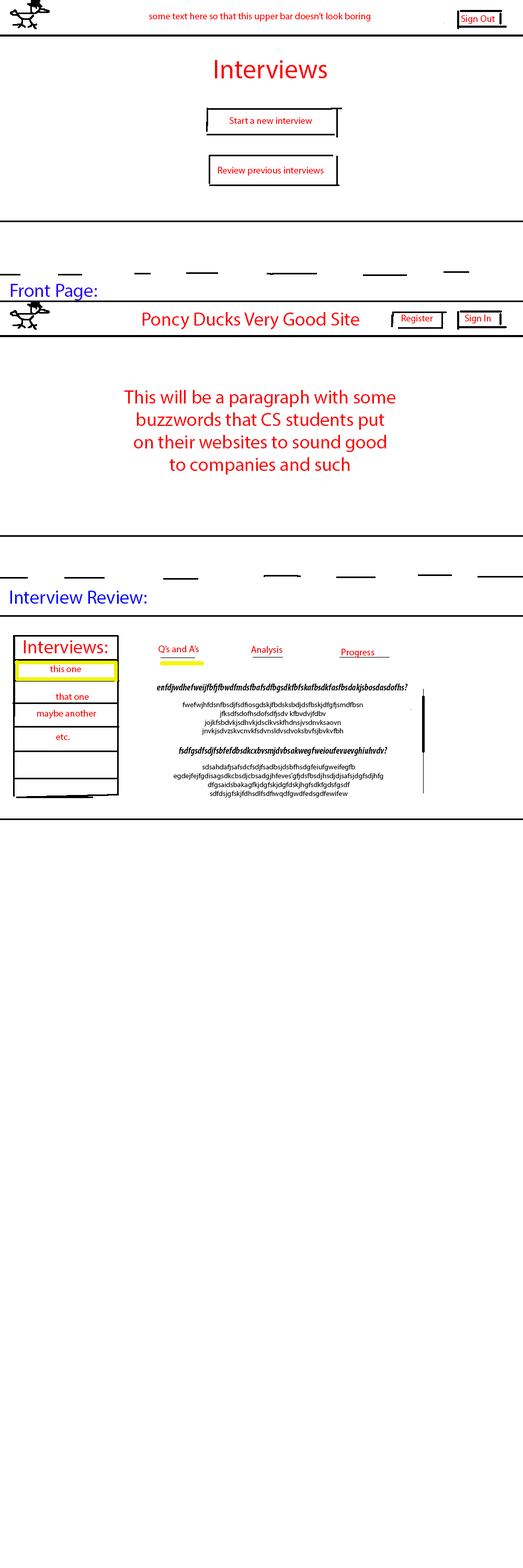
<style>
.page{position:relative;width:523px;height:1568px;background:#ffffff}
.page>*{position:absolute;margin:0}
.t1{font:9.4px "MyriadPro-Regular";color:#ff0000}
.t2{font:26.9px "MyriadPro-Regular";color:#ff0000}
.t3{font:18.8px "MyriadPro-Regular";color:#2400ff}
.t4{font:18.8px "MyriadPro-Regular";color:#ff0000}
.t5{font:18.8px "MyriadPro-Regular";color:#0006ff}
.t6{font:9.4px "MyriadPro-Regular";color:#f40000}
.t7{font:9.4px "MyriadPro-BoldCondIt";color:#000000}
.t8{font:7.3px "MyriadPro-Regular";color:#000000}
</style>
<div class="page">
<p class="t1" style="left:149px;top:13px;width:221px;height:8px">some text here so that this upper bar doesn’t look boring</p>
<p class="t1" style="left:461px;top:15px;width:34px;height:9px">Sign Out</p>
<p class="t2" style="left:215px;top:60px;width:112px;height:18px">Interviews</p>
<p class="t1" style="left:229px;top:117px;width:83px;height:7px">Start a new interview</p>
<p class="t1" style="left:218px;top:167px;width:106px;height:9px">Review previous interviews</p>
<p class="t3" style="left:10px;top:284px;width:87px;height:17px">Front Page:</p>
<p class="t4" style="left:142px;top:312px;width:217px;height:18px">Poncy Ducks Very Good Site</p>
<p class="t1" style="left:401px;top:315px;width:32px;height:9px">Register</p>
<p class="t1" style="left:465px;top:315px;width:25px;height:9px">Sign In</p>
<p class="t4" style="left:124px;top:390px;width:271px;height:85px;text-align:center">This will be a paragraph with some<br>buzzwords that CS students put<br>on their websites to sound good<br>to companies and such</p>
<p class="t5" style="left:10px;top:591px;width:137px;height:13px">Interview Review:</p>
<p class="t4" style="left:24px;top:640px;width:84px;height:13px">Interviews:</p>
<p class="t6" style="left:158px;top:645px;width:41px;height:8px">Q’s and A’s</p>
<p class="t6" style="left:251px;top:646px;width:31px;height:9px">Analysis</p>
<p class="t6" style="left:341px;top:649px;width:33px;height:9px">Progress</p>
<p class="t1" style="left:50px;top:665px;width:31px;height:7px">this one</p>
<p class="t7" style="left:157px;top:684px;width:251px;height:9px">enfdjwdhefweijfbfjfbwdfmdsfbafsdfbgsdkfbfskafbsdkfasfbsdakjsbosdasdofhs?</p>
<p class="t1" style="left:55px;top:693px;width:34px;height:7px">that one</p>
<p class="t8" style="left:182px;top:702px;width:181px;height:33px;text-align:center">fwefwjhfdsnfbsdjfsdfiosgdskjfbdsksbdjdsfbskjdfgfjsmdfbsn<br>jfksdfsdofhsdofsdfjsdv kfbvdvjfdbv<br>jojkfsbdvkjsdhvkjdsclkvskfhdnsjvsdnvksaovn<br>jnvkjsdvzskvcnvkfsdvnsldvsdvoksbvfsjbvkvfbh</p>
<p class="t1" style="left:37px;top:710px;width:59px;height:9px">maybe another</p>
<p class="t1" style="left:56px;top:734px;width:14px;height:6px">etc.</p>
<p class="t7" style="left:179px;top:747px;width:208px;height:9px">fsdfgsdfsdjfsbfefdbsdkcxbvsmjdvbsakwegfweioufevuevghiuhvdv?</p>
<p class="t8" style="left:174px;top:764px;width:209px;height:34px;text-align:center">sdsahdafjsafsdcfsdjfsadbsjdsbfhsdgfeiufgweifegfb<br>egdejfejfgdisagsdkcbsdjcbsadgjhfeves’gfjdsfbsdjhsdjdjsafsjdgfsdjhfg<br>dfgsaidsbakagfkjdgfskjdgfdskjhgfsdkfgdsfgsdf<br>sdfdsjgfskjfdhsdlfsdfiwqdfgwdfedsgdfewifew</p>
</div>
